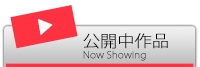
<style>
.page{position:relative;width:200px;height:67px;background:#ffffff}
.page>*{position:absolute;margin:0}
.t1{font:16px "KozGoPr6N-ExtraLight";color:#ffffff;font-weight:bold;scale:1.05 1}
.t2{font:9.4px/17.4px "KozGoPr6N-ExtraLight";color:#000000;font-weight:bold;scale:1.04 1}
.t3{font:16.1px/17.4px "KozGoPr6N-ExtraLight";color:#000000;font-weight:bold;scale:1.04 1}
</style>
<div class="page">
<p class="t1" style="left:38px;top:19px;width:15px;height:16px;rotate:-100deg">▼</p>
<p class="t2" style="left:83px;top:33px;width:85px;height:28px"><span class="t3">公開中作品<br></span>Now Showing</p>
</div>
